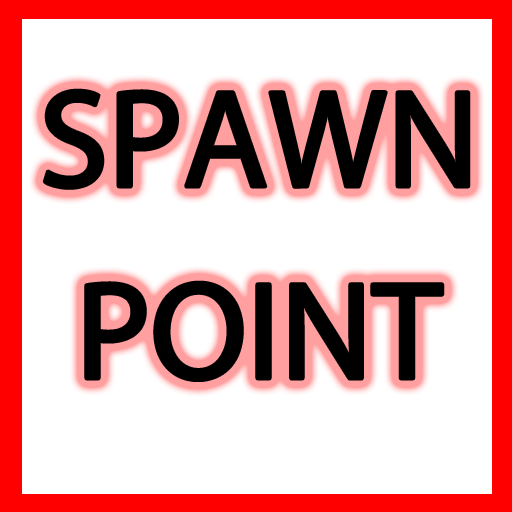
<style>
.page{position:relative;width:512px;height:512px;background:#ffffff}
.page>*{position:absolute;margin:0}
.t1{font:140px "MyriadPro-Regular";color:#000000}
</style>
<div class="page">
<p class="t1" style="left:44px;top:90px;width:425px;height:290px;text-align:center">SPAWN<br>POINT</p>
</div>
